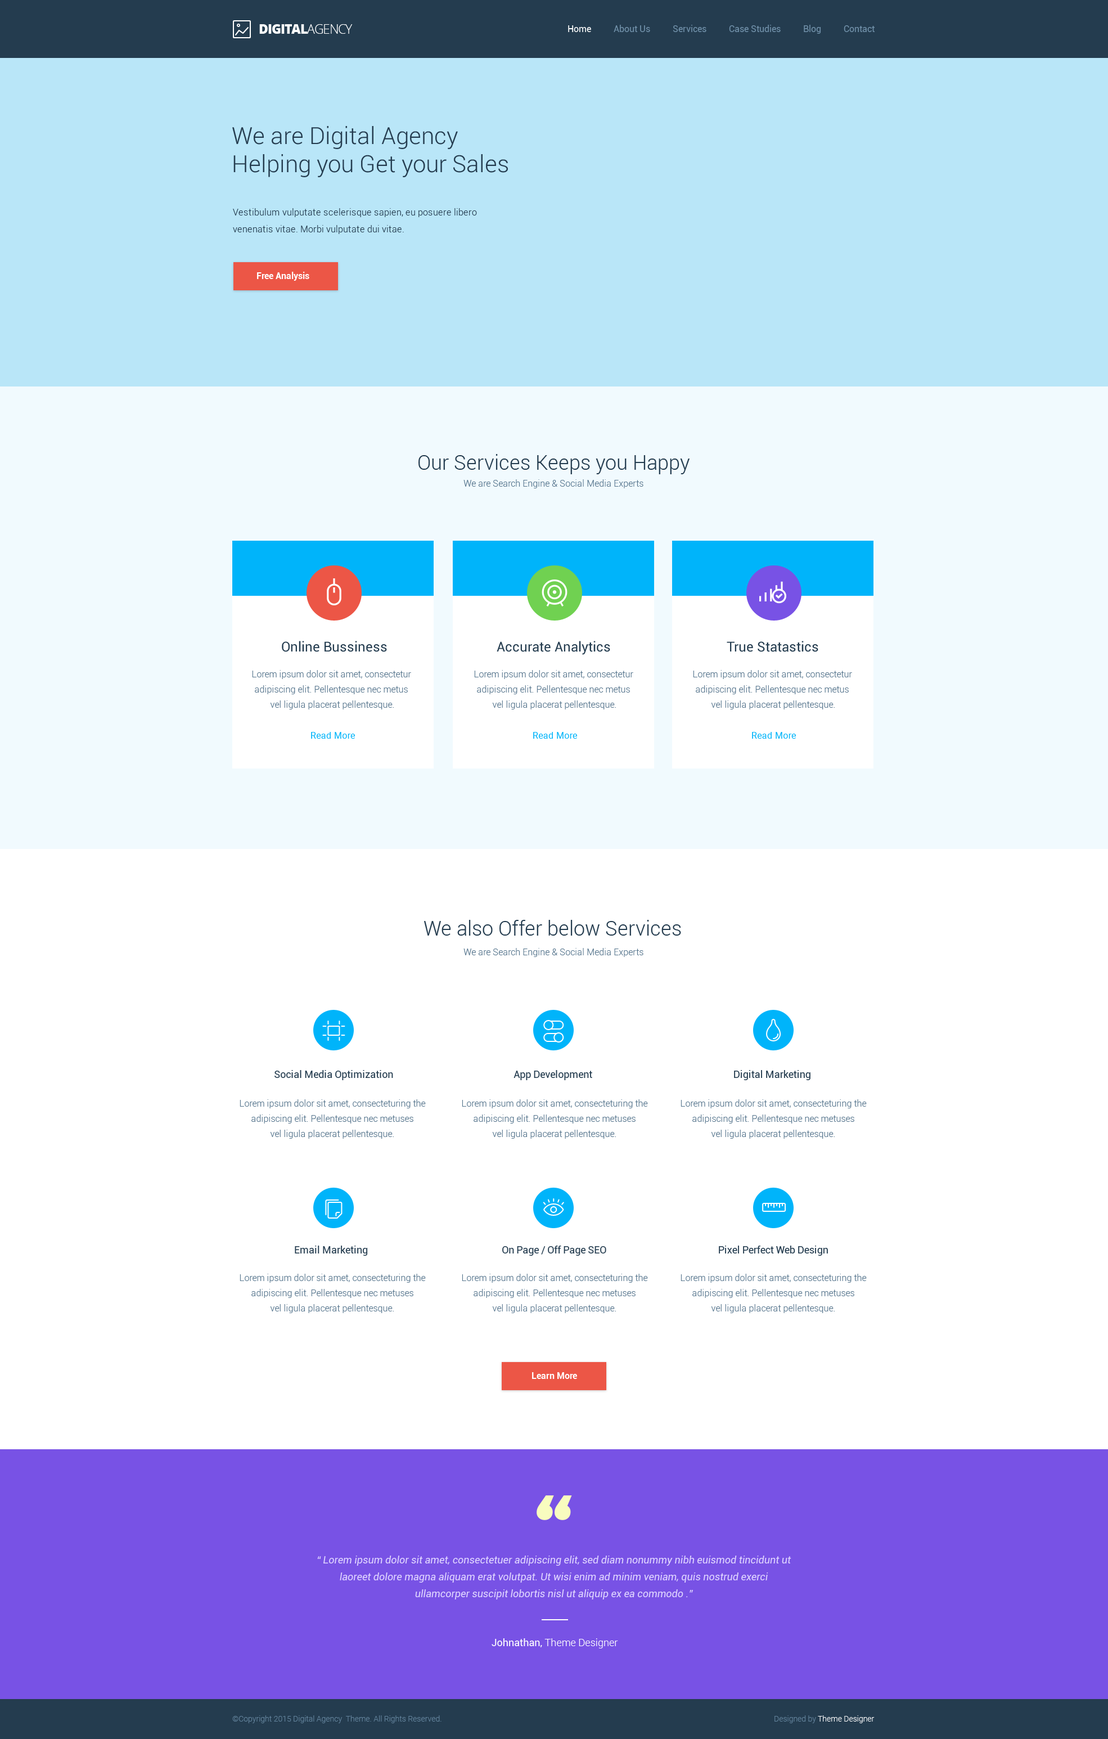
<style>
.page{position:relative;width:1108px;height:1739px;background:#ffffff}
.page>*{position:absolute;margin:0}
.t1{font:9px "Roboto-Regular";color:#7191aa}
.t2{font:9px "Roboto-Regular";color:#ffffff}
.t3{font:23.6px "Roboto-Light";color:#243c4f}
.t4{font:9px/16.9px "Roboto-Light";letter-spacing:0.025em;color:#243c4f}
.t5{font:9px "Roboto-Bold";color:#ffffff}
.t6{font:20.2px "Roboto-Light";color:#243c4f}
.t7{font:9px "Roboto-Light";color:#56758d}
.t8{font:13.5px "Roboto-Regular";color:#243c4f}
.t9{font:9px/15.2px "Roboto-Light";color:#56758d}
.t10{font:9px "Roboto-Regular";letter-spacing:0.024em;color:#00b4fa}
.t11{font:10.1px "Roboto-Regular";color:#243c4f}
.t12{font:10.1px/16.9px "Roboto-Italic";color:#ded3ff}
.t13{font:10.1px "Roboto-Light";color:#ffffff}
.t14{font:10.1px "Roboto-Regular";color:#ffffff}
.t15{font:7.9px "Roboto-Light";color:#63839c}
.t16{font:7.9px "Roboto-Light";color:#fffeff}
</style>
<div class="page">
<p class="t1" style="left:568px;top:25px;width:307px;height:9px"><span class="t2">Home          </span>About Us          Services          Case Studies          Blog          Contact</p>
<p class="t3" style="left:232px;top:126px;width:276px;height:51px">We are Digital Agency<br>Helping you Get your Sales</p>
<p class="t4" style="left:233px;top:208px;width:244px;height:26px">Vestibulum vulputate scelerisque sapien, eu posuere libero <br>venenatis vitae. Morbi vulputate dui vitae.</p>
<p class="t5" style="left:257px;top:272px;width:52px;height:9px">Free Analysis</p>
<p class="t6" style="left:418px;top:454px;width:272px;height:20px">Our Services Keeps you Happy</p>
<p class="t7" style="left:464px;top:479px;width:180px;height:9px">We are Search Engine &amp; Social Media Experts</p>
<p class="t8" style="left:282px;top:641px;width:105px;height:11px">Online Bussiness</p>
<p class="t8" style="left:497px;top:641px;width:113px;height:14px">Accurate Analytics</p>
<p class="t8" style="left:727px;top:641px;width:91px;height:11px">True Statastics</p>
<p class="t9" style="left:252px;top:670px;width:159px;height:39px;text-align:center">Lorem ipsum dolor sit amet, consectetur <br>adipiscing elit. Pellentesque nec metus <br>vel ligula placerat pellentesque.</p>
<p class="t9" style="left:474px;top:670px;width:159px;height:39px;text-align:center">Lorem ipsum dolor sit amet, consectetur <br>adipiscing elit. Pellentesque nec metus <br>vel ligula placerat pellentesque.</p>
<p class="t9" style="left:693px;top:670px;width:159px;height:39px;text-align:center">Lorem ipsum dolor sit amet, consectetur <br>adipiscing elit. Pellentesque nec metus <br>vel ligula placerat pellentesque.</p>
<p class="t10" style="left:311px;top:732px;width:44px;height:7px">Read More</p>
<p class="t10" style="left:533px;top:732px;width:44px;height:7px">Read More</p>
<p class="t10" style="left:752px;top:732px;width:44px;height:7px">Read More</p>
<p class="t6" style="left:424px;top:920px;width:257px;height:15px">We also Offer below Services</p>
<p class="t7" style="left:464px;top:948px;width:180px;height:9px">We are Search Engine &amp; Social Media Experts</p>
<p class="t11" style="left:274px;top:1070px;width:119px;height:10px">Social Media Optimization</p>
<p class="t11" style="left:514px;top:1070px;width:78px;height:10px">App Development</p>
<p class="t11" style="left:734px;top:1070px;width:77px;height:10px">Digital Marketing</p>
<p class="t9" style="left:240px;top:1099px;width:186px;height:39px;text-align:center">Lorem ipsum dolor sit amet, consecteturing the<br>adipiscing elit. Pellentesque nec metuses<br>vel ligula placerat pellentesque.</p>
<p class="t9" style="left:462px;top:1099px;width:186px;height:39px;text-align:center">Lorem ipsum dolor sit amet, consecteturing the<br>adipiscing elit. Pellentesque nec metuses<br>vel ligula placerat pellentesque.</p>
<p class="t9" style="left:681px;top:1099px;width:186px;height:39px;text-align:center">Lorem ipsum dolor sit amet, consecteturing the<br>adipiscing elit. Pellentesque nec metuses<br>vel ligula placerat pellentesque.</p>
<p class="t11" style="left:295px;top:1245px;width:73px;height:11px">Email Marketing</p>
<p class="t11" style="left:502px;top:1245px;width:104px;height:11px">On Page / Off Page SEO</p>
<p class="t11" style="left:719px;top:1245px;width:109px;height:11px">Pixel Perfect Web Design</p>
<p class="t9" style="left:240px;top:1274px;width:186px;height:39px;text-align:center">Lorem ipsum dolor sit amet, consecteturing the<br>adipiscing elit. Pellentesque nec metuses<br>vel ligula placerat pellentesque.</p>
<p class="t9" style="left:462px;top:1274px;width:186px;height:39px;text-align:center">Lorem ipsum dolor sit amet, consecteturing the<br>adipiscing elit. Pellentesque nec metuses<br>vel ligula placerat pellentesque.</p>
<p class="t9" style="left:681px;top:1274px;width:186px;height:39px;text-align:center">Lorem ipsum dolor sit amet, consecteturing the<br>adipiscing elit. Pellentesque nec metuses<br>vel ligula placerat pellentesque.</p>
<p class="t5" style="left:532px;top:1372px;width:45px;height:7px">Learn More</p>
<p class="t12" style="left:317px;top:1555px;width:474px;height:44px;text-align:center">“ Lorem ipsum dolor sit amet, consectetuer adipiscing elit, sed diam nonummy nibh euismod tincidunt ut <br>laoreet dolore magna aliquam erat volutpat. Ut wisi enim ad minim veniam, quis nostrud exerci<br>ullamcorper suscipit lobortis nisl ut aliquip ex ea commodo .”</p>
<p class="t13" style="left:492px;top:1638px;width:126px;height:10px"><span class="t14">Johnathan, </span>Theme Designer</p>
<p class="t15" style="left:232px;top:1715px;width:210px;height:8px">©Copyright 2015 Digital Agency  Theme. All Rights Reserved.</p>
<p class="t16" style="left:775px;top:1715px;width:100px;height:8px"><span class="t15">Designed by </span>Theme Designer</p>
</div>
